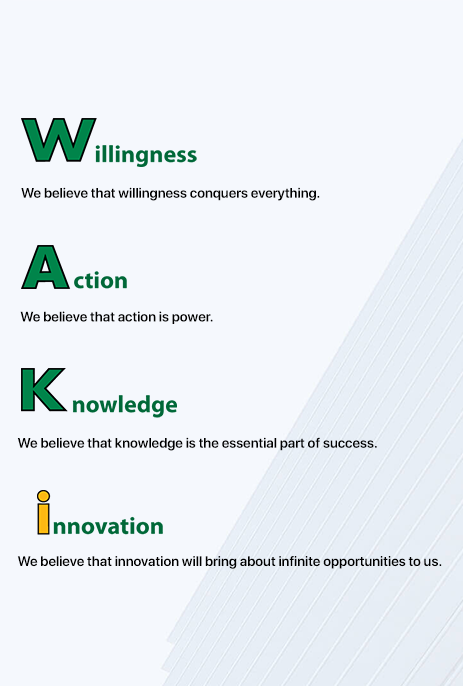
<style>
.page{position:relative;width:463px;height:686px;background:#f5f8fd}
.page>*{position:absolute;margin:0}
.t1{font:14px "SFProDisplay-Semibold";color:#000000}
</style>
<div class="page">
<p class="t1" style="left:21px;top:187px;width:299px;height:14px">We believe that willingness conquers everything.</p>
<p class="t1" style="left:20px;top:311px;width:193px;height:13px">We believe that action is power.</p>
<p class="t1" style="left:17px;top:437px;width:360px;height:14px">We believe that knowledge is the essential part of success.</p>
<p class="t1" style="left:17px;top:556px;width:425px;height:13px">We believe that innovation will bring about infinite opportunities to us.</p>
</div>
